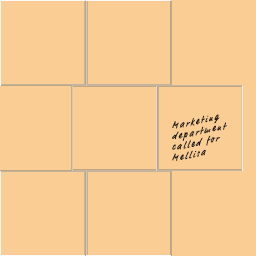
<style>
.page{position:relative;width:256px;height:256px;background:#f9cd94}
.page>*{position:absolute;margin:0}
.t1{font:9px "MarketOT";letter-spacing:0.205em;color:#181716}
</style>
<div class="page">
<p class="t1" style="left:172px;top:114px;width:55px;height:47px">Marketing<br>department <br>called for <br>Mellisa</p>
</div>
